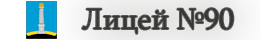
<style>
.page{position:relative;width:260px;height:40px}
.page>*{position:absolute;margin:0}
.t1{font:30px "Sylfaen";color:#373634}
</style>
<div class="page">
<p class="t1" style="left:82px;top:8px;width:152px;height:26px">Лицей №90</p>
</div>
